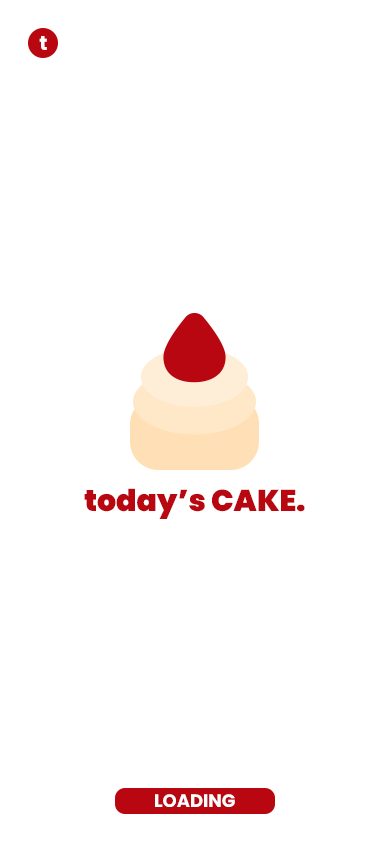
<style>
.page{position:relative;width:390px;height:844px;background:#ffffff}
.page>*{position:absolute;margin:0}
.t1{font:20px "Poppins-Bold";color:#ffffff}
.t2{font:30px "Poppins-Black";color:#b80711}
.t3{font:18px "Poppins-Bold";color:#ffffff}
</style>
<div class="page">
<p class="t1" style="left:39px;top:36px;width:8px;height:14px">t</p>
<p class="t2" style="left:84px;top:488px;width:221px;height:31px">today’s CAKE.</p>
<p class="t3" style="left:155px;top:794px;width:80px;height:13px">LOADING</p>
</div>
